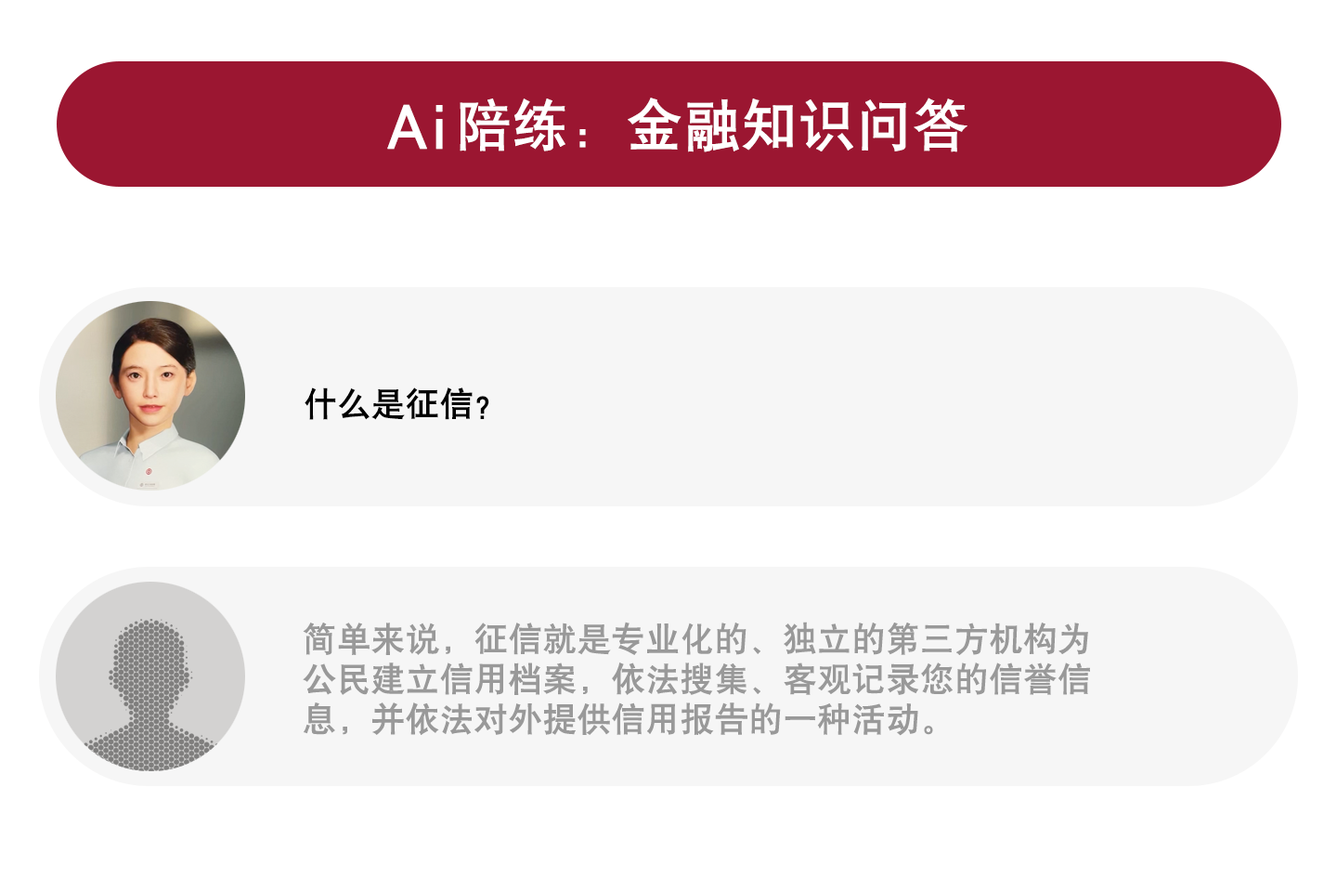
<style>
.page{position:relative;width:1337px;height:892px;background:#ffffff}
.page>*{position:absolute;margin:0}
.t1{font:55.7px "HYb1gj";color:#ffffff;font-weight:bold}
.t2{font:65px "HYb1gj";color:#ffffff;font-weight:bold}
.t3{font:33.4px "HYb1gj";color:#000000;font-weight:bold}
.t4{font:33.4px "HYb1gj";color:#999999;font-weight:bold}
</style>
<div class="page">
<p class="t1" style="left:460px;top:98px;width:508px;height:54px">陪练：金融知识问答</p>
<p class="t2" style="left:387px;top:104px;width:56px;height:46px">Ai</p>
<p class="t3" style="left:305px;top:387px;width:184px;height:33px">什么是征信？</p>
<p class="t4" style="left:303px;top:621px;width:787px;height:115px">简单来说，征信就是专业化的、独立的第三方机构为<br>公民建立信用档案，依法搜集、客观记录您的信誉信<br>息，并依法对外提供信用报告的一种活动。</p>
</div>
